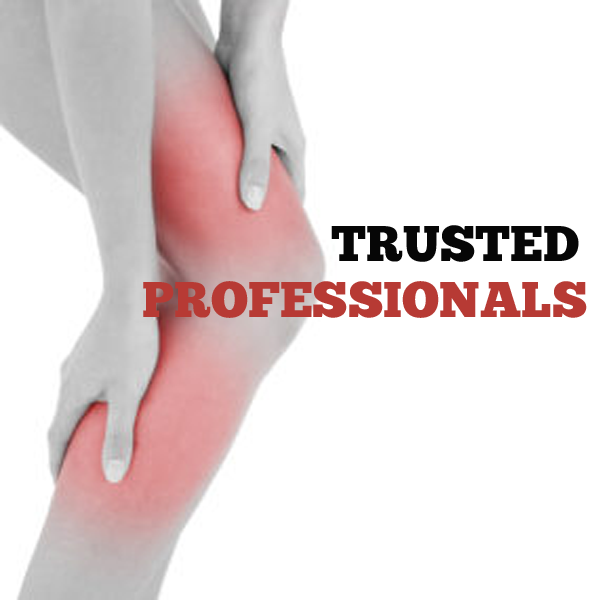
<style>
.page{position:relative;width:600px;height:600px;background:#ffffff}
.page>*{position:absolute;margin:0}
.t1{font:50px "ChunkFive-Roman";color:#060606}
.t2{font:50px "ChunkFive-Roman";color:#b73a34}
</style>
<div class="page">
<p class="t1" style="left:331px;top:225px;width:248px;height:37px">TRUSTED</p>
<p class="t2" style="left:143px;top:281px;width:444px;height:37px">PROFESSIONALS</p>
</div>
